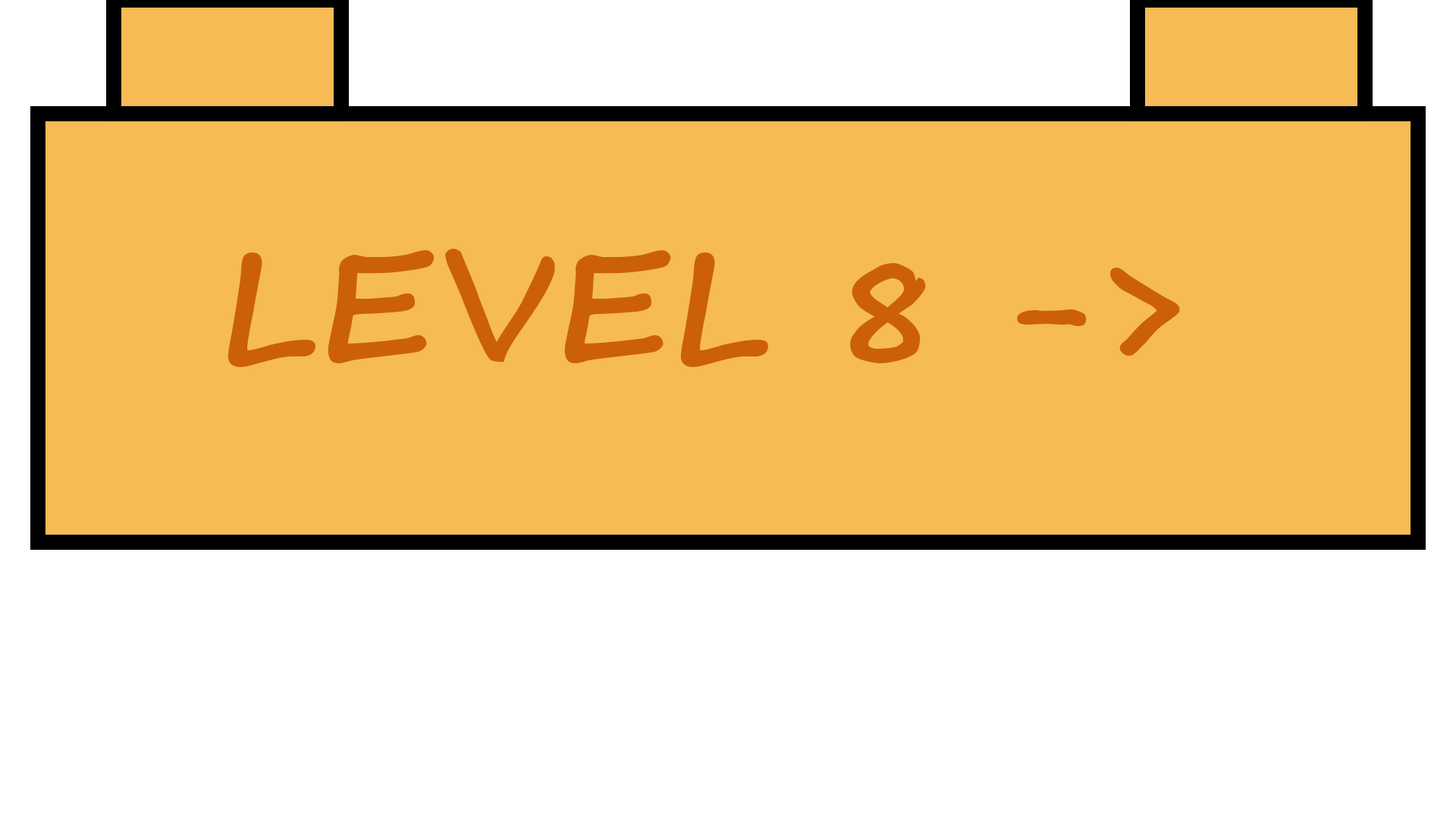
<style>
.page{position:relative;width:1456px;height:819px;background:#f6bb55}
.page>*{position:absolute;margin:0}
.t1{font:151.7px "SegoeScript-Bold";color:#cc600a;text-transform:uppercase}
</style>
<div class="page">
<p class="t1" style="left:227px;top:249px;width:953px;height:118px">Level 8 -&gt;</p>
</div>
